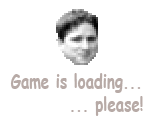
<style>
.page{position:relative;width:154px;height:130px;background:#ffffff}
.page>*{position:absolute;margin:0}
.t1{font:19.2px "ComicSansMS-Bold";color:#b7aaa6;scale:0.78 1}
</style>
<div class="page">
<p class="t1" style="left:10px;top:73px;width:133px;height:43px">Game is loading...<br>         ... please!</p>
</div>
